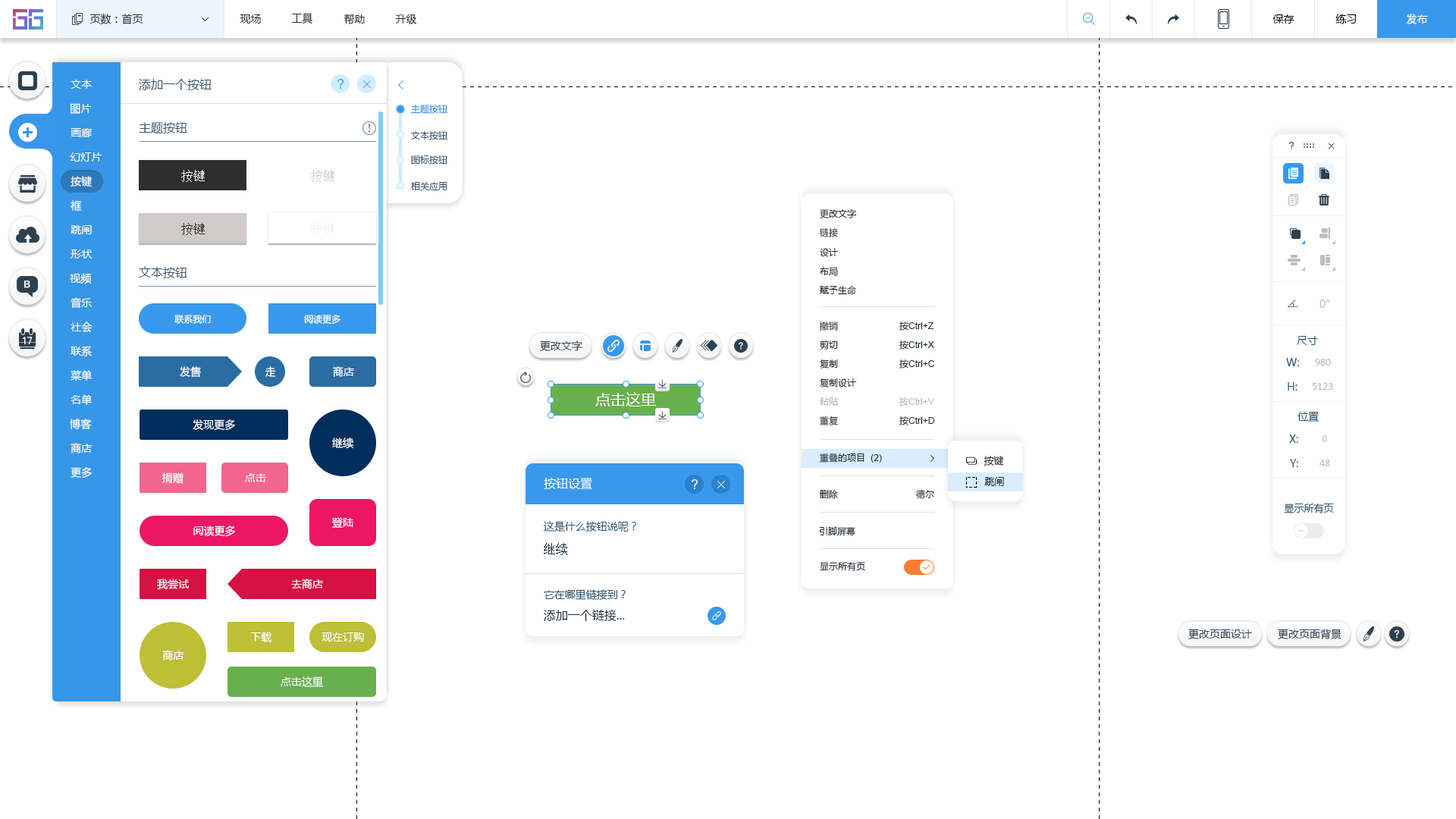
<style>
.page{position:relative;width:1456px;height:819px;background:#ffffff}
.page>*{position:absolute;margin:0}
.t1{font:10.6px "MicrosoftYaHei";color:#20303c}
.t2{font:10.6px "MicrosoftYaHei";color:#000000}
.t3{font:10.6px "MicrosoftYaHei";color:#ffffff}
.t4{font:12.1px "MicrosoftYaHei";color:#395671}
.t5{font:9.1px "MicrosoftYaHei";color:#3696e8}
.t6{font:9.1px "MicrosoftYaHei";color:#395671}
.t7{font:12.1px "SimSun";color:#ffffff}
.t8{font:12.1px "SimSun";color:#cacaca}
.t9{font:9.1px "MicrosoftYaHei";color:#1d2d3c}
.t10{font:12.1px "SimSun";color:#2f2e2e}
.t11{font:12.1px "SimSun";color:#edf1f5}
.t12{font:10.6px "MicrosoftYaHei";color:#bcbcbc}
.t13{font:9.1px "MicrosoftYaHei";color:#ffffff}
.t14{font:9.1px "ArialMT";color:#1d2d3c}
.t15{font:10.6px "MicrosoftYaHei";color:#2d4150}
.t16{font:10.6px "MicrosoftYaHei";color:#2b5672}
.t17{font:9.1px "MicrosoftYaHei";color:#bcbcbc}
.t18{font:15.2px "MicrosoftYaHei";color:#ffffff}
.t19{font:9.1px "MicrosoftYaHei";color:#bababa}
.t20{font:9.1px "ArialMT";color:#bababa}
.t21{font:9.1px "MicrosoftYaHei"}
.t22{font:9.9px "MicrosoftYaHei";color:#1d2d3c}
.t23{font:12.1px "MicrosoftYaHei";color:#ffffff}
.t24{font:9.9px "MicrosoftYaHei";color:#2b5672}
.t25{font:12.1px "SimSun";color:#162d3d}
.t26{font:12.1px "MicrosoftYaHei";color:#162d3d}
</style>
<div class="page">
<p class="t1" style="left:89px;top:14px;width:54px;height:11px">页数：首页</p>
<p class="t1" style="left:240px;top:14px;width:21px;height:10px">现场</p>
<p class="t1" style="left:291px;top:13px;width:22px;height:11px">工具</p>
<p class="t1" style="left:344px;top:14px;width:21px;height:11px">帮助</p>
<p class="t1" style="left:395px;top:14px;width:22px;height:10px">升级</p>
<p class="t2" style="left:1272px;top:14px;width:22px;height:10px">保存</p>
<p class="t2" style="left:1335px;top:14px;width:22px;height:10px">练习</p>
<p class="t3" style="left:1406px;top:14px;width:22px;height:10px">发布</p>
<p class="t3" style="left:71px;top:80px;width:21px;height:9px">文本</p>
<p class="t4" style="left:139px;top:79px;width:73px;height:11px">添加一个按钮</p>
<p class="t3" style="left:71px;top:103px;width:21px;height:12px">图片</p>
<p class="t5" style="left:411px;top:105px;width:36px;height:9px">主题按钮</p>
<p class="t4" style="left:139px;top:122px;width:48px;height:11px">主题按钮</p>
<p class="t3" style="left:71px;top:128px;width:22px;height:9px">画廊</p>
<p class="t6" style="left:411px;top:131px;width:36px;height:9px">文本按钮</p>
<p class="t3" style="left:70px;top:152px;width:32px;height:10px">幻灯片</p>
<p class="t6" style="left:411px;top:155px;width:36px;height:10px">图标按钮</p>
<p class="t7" style="left:181px;top:170px;width:24px;height:12px">按键</p>
<p class="t8" style="left:311px;top:170px;width:23px;height:12px">按键</p>
<p class="t3" style="left:71px;top:176px;width:21px;height:11px">按键</p>
<p class="t6" style="left:411px;top:182px;width:36px;height:9px">相关应用</p>
<p class="t3" style="left:71px;top:200px;width:11px;height:11px">框</p>
<p class="t9" style="left:820px;top:209px;width:37px;height:9px">更改文字</p>
<p class="t3" style="left:71px;top:225px;width:21px;height:9px">跳闸</p>
<p class="t10" style="left:181px;top:223px;width:24px;height:12px">按键</p>
<p class="t11" style="left:311px;top:223px;width:23px;height:12px">按键</p>
<p class="t9" style="left:819px;top:227px;width:19px;height:10px">链接</p>
<p class="t3" style="left:71px;top:249px;width:22px;height:10px">形状</p>
<p class="t9" style="left:820px;top:248px;width:18px;height:9px">设计</p>
<p class="t4" style="left:139px;top:266px;width:48px;height:12px">文本按钮</p>
<p class="t9" style="left:820px;top:267px;width:18px;height:9px">布局</p>
<p class="t3" style="left:70px;top:273px;width:22px;height:11px">视频</p>
<p class="t9" style="left:820px;top:285px;width:36px;height:10px">赋予生命</p>
<p class="t3" style="left:71px;top:297px;width:21px;height:11px">音乐</p>
<p class="t12" style="left:1319px;top:300px;width:11px;height:8px">0°</p>
<p class="t13" style="left:174px;top:315px;width:37px;height:9px">联系我们</p>
<p class="t13" style="left:304px;top:314px;width:36px;height:10px">阅读更多</p>
<p class="t3" style="left:71px;top:322px;width:22px;height:10px">社会</p>
<p class="t9" style="left:819px;top:321px;width:19px;height:10px">撤销</p>
<p class="t14" style="left:899px;top:322px;width:34px;height:9px"><span class="t9">按</span>Ctrl+Z</p>
<p class="t15" style="left:540px;top:340px;width:42px;height:11px">更改文字</p>
<p class="t9" style="left:820px;top:340px;width:18px;height:10px">剪切</p>
<p class="t14" style="left:899px;top:340px;width:35px;height:10px"><span class="t9">按</span>Ctrl+X</p>
<p class="t16" style="left:1297px;top:336px;width:21px;height:9px">尺寸</p>
<p class="t3" style="left:71px;top:346px;width:21px;height:10px">联系</p>
<p class="t9" style="left:820px;top:359px;width:18px;height:10px">复制</p>
<p class="t14" style="left:899px;top:359px;width:35px;height:10px"><span class="t9">按</span>Ctrl+C</p>
<p class="t16" style="left:1286px;top:358px;width:13px;height:8px">W:</p>
<p class="t17" style="left:1315px;top:359px;width:16px;height:7px">980</p>
<p class="t3" style="left:71px;top:370px;width:21px;height:11px">菜单</p>
<p class="t3" style="left:180px;top:366px;width:21px;height:12px">发售</p>
<p class="t3" style="left:265px;top:366px;width:11px;height:11px">走</p>
<p class="t3" style="left:333px;top:366px;width:21px;height:11px">商店</p>
<p class="t9" style="left:820px;top:378px;width:36px;height:10px">复制设计</p>
<p class="t16" style="left:1288px;top:382px;width:9px;height:9px">H:</p>
<p class="t17" style="left:1312px;top:383px;width:21px;height:7px">5123</p>
<p class="t3" style="left:71px;top:394px;width:21px;height:11px">名单</p>
<p class="t18" style="left:595px;top:392px;width:61px;height:14px">点击这里</p>
<p class="t19" style="left:820px;top:397px;width:18px;height:9px">粘贴</p>
<p class="t20" style="left:899px;top:397px;width:35px;height:9px"><span class="t19">按</span>Ctrl+V</p>
<p class="t16" style="left:1297px;top:411px;width:22px;height:11px">位置</p>
<p class="t3" style="left:70px;top:419px;width:22px;height:11px">博客</p>
<p class="t3" style="left:193px;top:419px;width:42px;height:12px">发现更多</p>
<p class="t21" style="left:819px;top:416px;width:19px;height:9px">重复</p>
<p class="t14" style="left:899px;top:416px;width:35px;height:9px"><span class="t9">按</span>Ctrl+D</p>
<p class="t3" style="left:332px;top:438px;width:22px;height:11px">继续</p>
<p class="t16" style="left:1289px;top:435px;width:9px;height:8px">X:</p>
<p class="t17" style="left:1322px;top:435px;width:5px;height:7px">0</p>
<p class="t3" style="left:71px;top:443px;width:22px;height:10px">商店</p>
<p class="t9" style="left:819px;top:453px;width:63px;height:10px">重叠的项目  (2)</p>
<p class="t22" style="left:984px;top:456px;width:20px;height:10px">按键</p>
<p class="t16" style="left:1290px;top:459px;width:8px;height:8px">Y:</p>
<p class="t17" style="left:1319px;top:460px;width:11px;height:6px">48</p>
<p class="t3" style="left:71px;top:467px;width:21px;height:12px">更多</p>
<p class="t3" style="left:162px;top:472px;width:22px;height:12px">捐赠</p>
<p class="t3" style="left:245px;top:473px;width:21px;height:9px">点击</p>
<p class="t23" style="left:544px;top:478px;width:48px;height:11px">按钮设置</p>
<p class="t22" style="left:984px;top:477px;width:20px;height:9px">跳闸</p>
<p class="t9" style="left:820px;top:490px;width:18px;height:9px">删除</p>
<p class="t9" style="left:916px;top:489px;width:18px;height:10px">德尔</p>
<p class="t24" style="left:1284px;top:503px;width:50px;height:10px">显示所有页</p>
<p class="t3" style="left:332px;top:517px;width:21px;height:11px">登陆</p>
<p class="t16" style="left:543px;top:521px;width:93px;height:11px">这是什么按钮说呢？</p>
<p class="t3" style="left:193px;top:526px;width:42px;height:11px">阅读更多</p>
<p class="t9" style="left:819px;top:527px;width:36px;height:9px">引脚屏幕</p>
<p class="t25" style="left:544px;top:543px;width:23px;height:12px">继续</p>
<p class="t9" style="left:820px;top:562px;width:45px;height:9px">显示所有页</p>
<p class="t3" style="left:157px;top:579px;width:32px;height:11px">我尝试</p>
<p class="t3" style="left:291px;top:579px;width:32px;height:10px">去商店</p>
<p class="t16" style="left:544px;top:589px;width:82px;height:11px">它在哪里链接到？</p>
<p class="t26" style="left:544px;top:609px;width:81px;height:12px">添加一个链接...</p>
<p class="t15" style="left:1188px;top:629px;width:64px;height:10px">更改页面设计</p>
<p class="t15" style="left:1278px;top:629px;width:63px;height:10px">更改页面背景</p>
<p class="t3" style="left:250px;top:632px;width:22px;height:10px">下载</p>
<p class="t3" style="left:322px;top:632px;width:42px;height:10px">现在订购</p>
<p class="t3" style="left:162px;top:650px;width:22px;height:10px">商店</p>
<p class="t3" style="left:281px;top:676px;width:42px;height:11px">点击这里</p>
</div>
